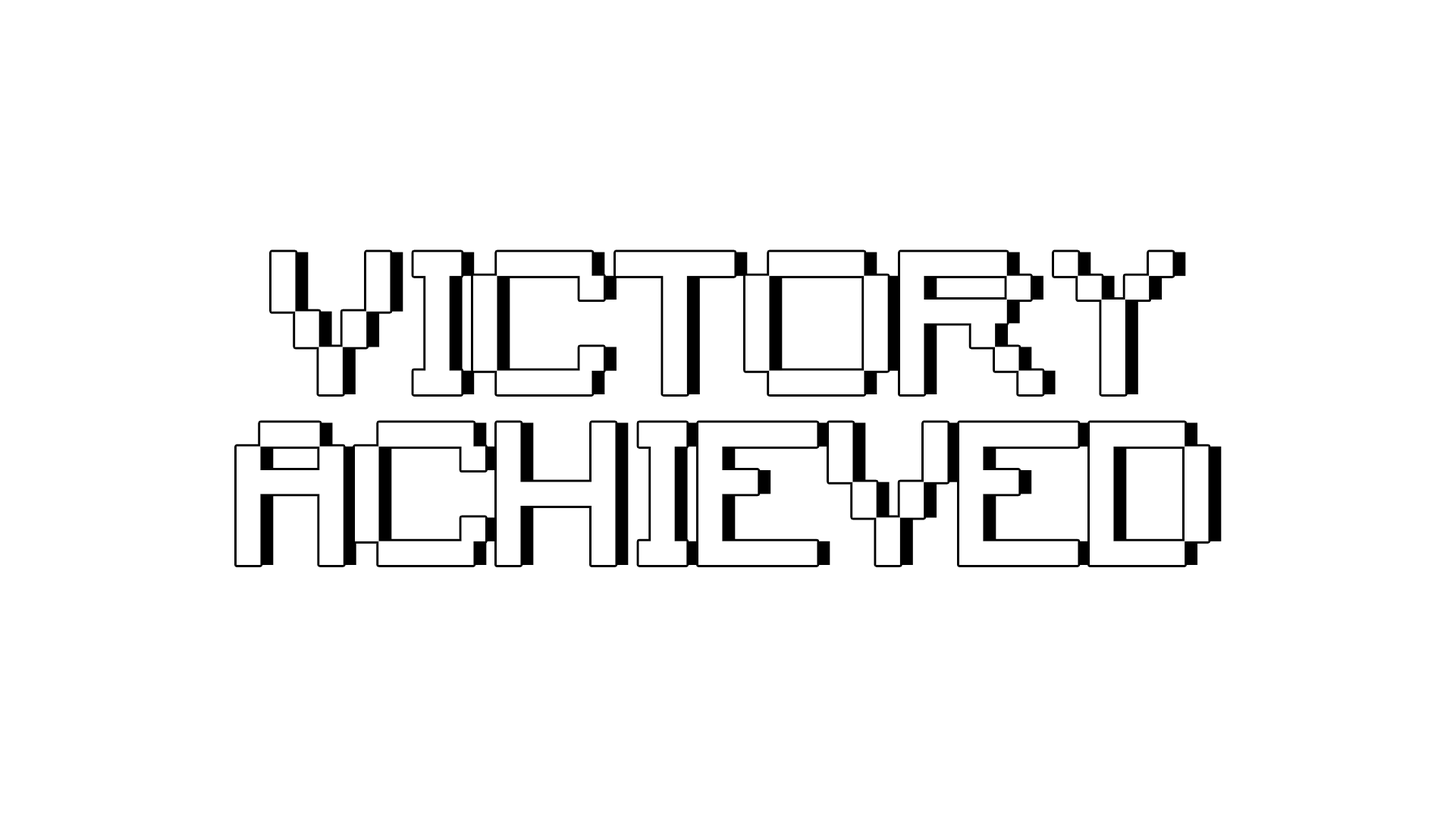
<style>
.page{position:relative;width:1456px;height:819px;background:#ffffff}
.page>*{position:absolute;margin:0}
.t1{font:189.6px "Minecraft"}
</style>
<div class="page">
<p class="t1" style="left:249px;top:252px;width:973px;height:313px">VICTORY ACHIEVED</p>
</div>
